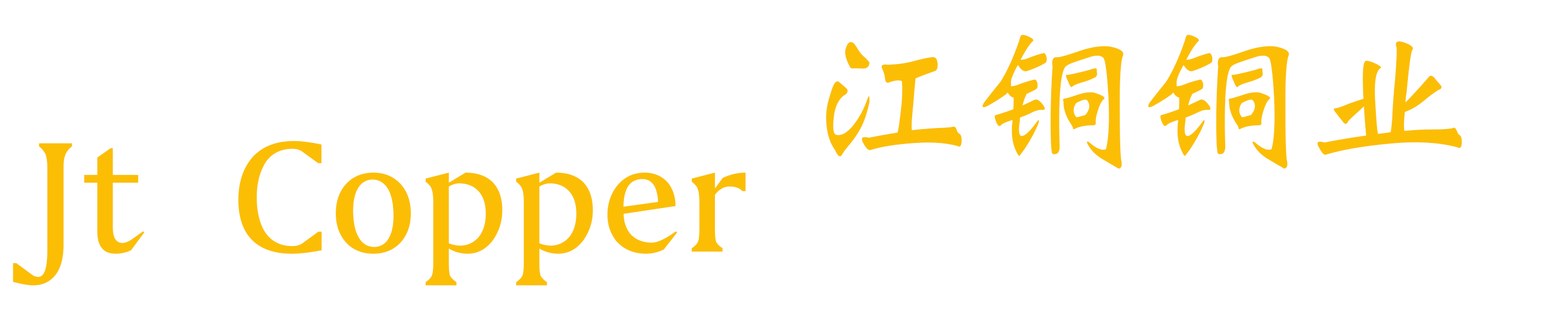
<style>
.page{position:relative;width:1568px;height:331px;background:#ffffff}
.page>*{position:absolute;margin:0}
.t1{font:165.6px "WeibeiSC-Bold";color:#fbbe04}
</style>
<div class="page">
<p class="t1" style="left:826px;top:35px;width:636px;height:134px">江铜铜业</p>
<p class="t1" style="left:13px;top:141px;width:733px;height:145px">Jt Copper</p>
</div>
